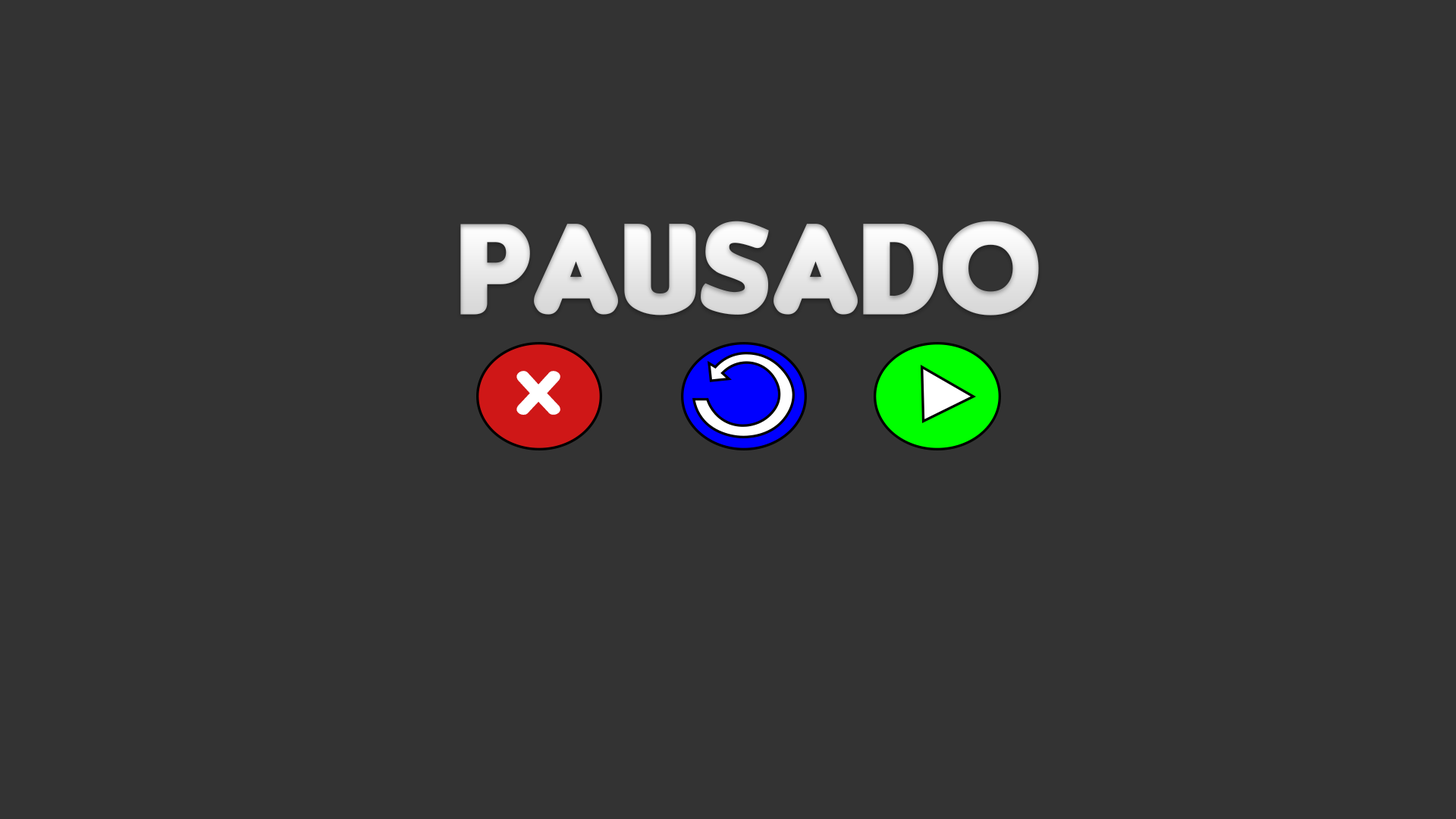
<style>
.page{position:relative;width:1456px;height:819px;background:#333333}
.page>*{position:absolute;margin:0}
.t1{font:137.3px "Insaniburger-with-Cheese";color:#e4e4e4}
.t2{font:66px "Insaniburger-with-Cheese";color:#ffffff}
</style>
<div class="page">
<p class="t1" style="left:460px;top:221px;width:579px;height:94px">PAUSADO</p>
<p class="t2" style="left:516px;top:371px;width:44px;height:44px">X</p>
</div>
